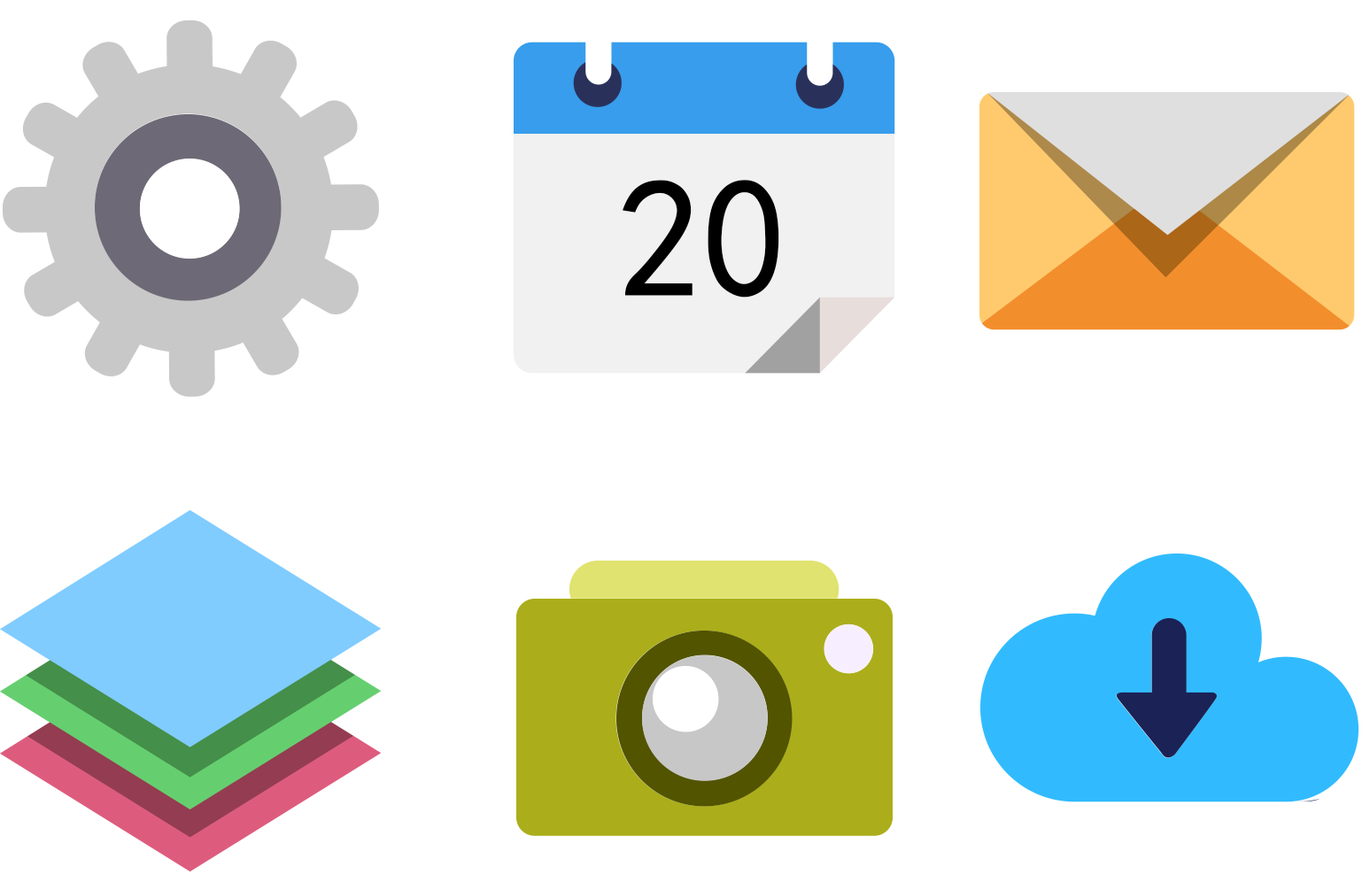
<style>
.page{position:relative;width:1362px;height:875px;background:#ffffff}
.page>*{position:absolute;margin:0}
.t1{font:170.4px "SimHei";color:#000000}
</style>
<div class="page">
<p class="t1" style="left:623px;top:180px;width:157px;height:118px">20</p>
</div>
